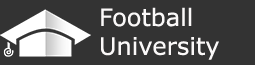
<style>
.page{position:relative;width:255px;height:65px;background:#333333}
.page>*{position:absolute;margin:0}
.t1{font:24px "Verdana";color:#fbf9f9}
</style>
<div class="page">
<p class="t1" style="left:101px;top:7px;width:118px;height:53px">Football<br>University</p>
</div>
